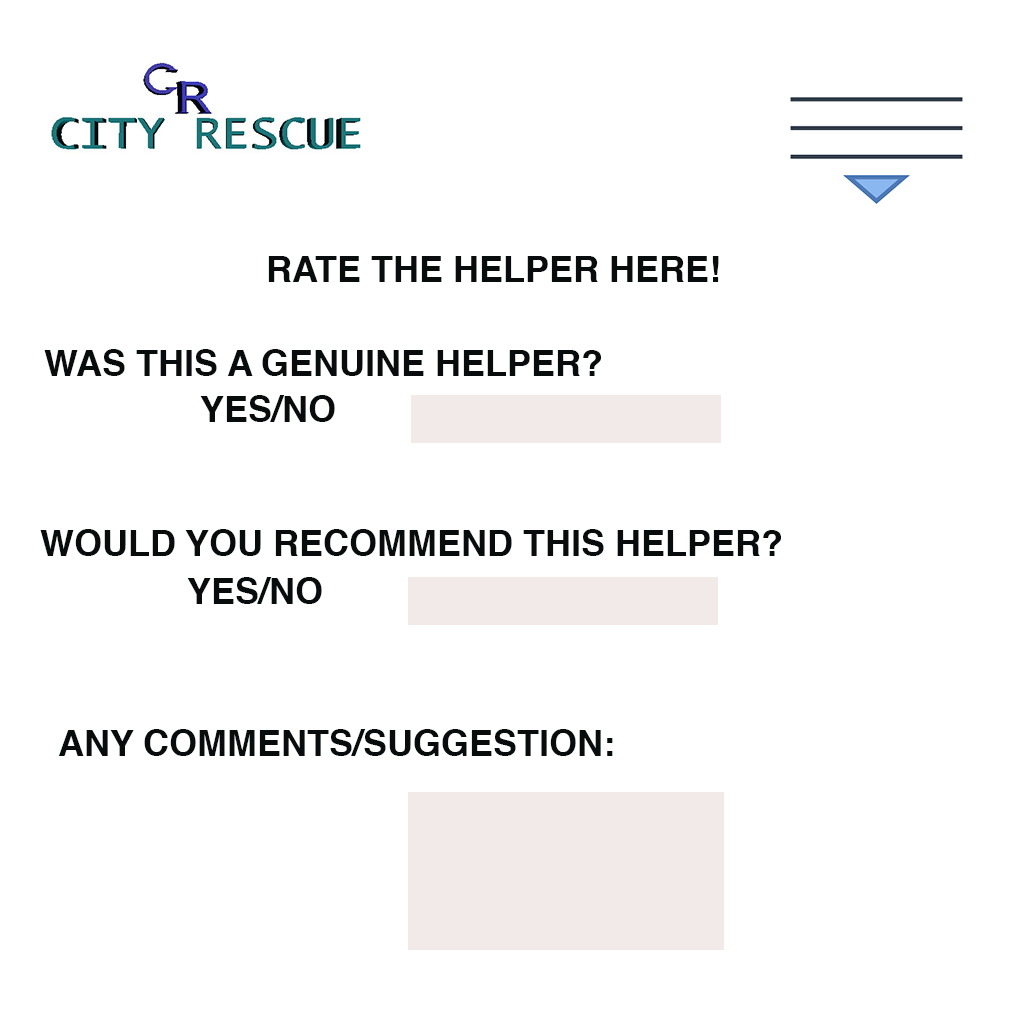
<style>
.page{position:relative;width:1024px;height:1024px;background:#ffffff}
.page>*{position:absolute;margin:0}
.t1{font:36px "Helvetica-Bold";color:#090c0d;text-transform:uppercase}
</style>
<div class="page">
<p class="t1" style="left:268px;top:256px;width:451px;height:26px">rate the helper here!</p>
<p class="t1" style="left:44px;top:349px;width:557px;height:27px">was this a genuine helper?</p>
<p class="t1" style="left:200px;top:395px;width:135px;height:27px">yes/no</p>
<p class="t1" style="left:40px;top:529px;width:741px;height:27px">would you recommend this helper?</p>
<p class="t1" style="left:187px;top:577px;width:135px;height:27px">yes/no</p>
<p class="t1" style="left:58px;top:729px;width:555px;height:27px">any comments/suggestion:</p>
</div>
